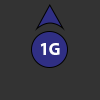
<style>
.page{position:relative;width:100px;height:100px;background:#333333}
.page>*{position:absolute;margin:0}
.t1{font:17.5px "MyriadPro-Bold";letter-spacing:-0.025em;color:#ffffff}
</style>
<div class="page">
<p class="t1" style="left:40px;top:43px;width:20px;height:12px">1G</p>
</div>
